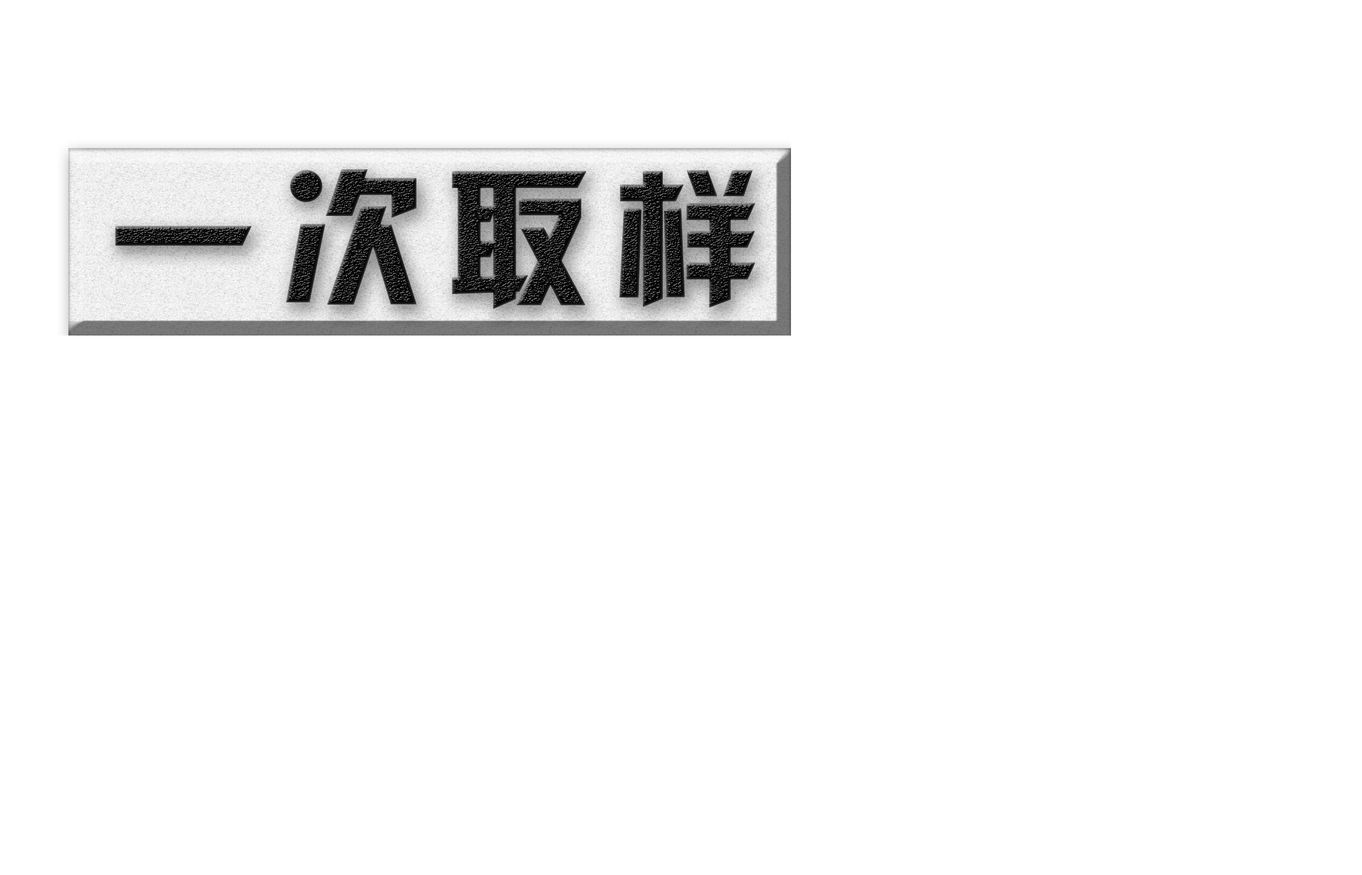
<style>
.page{position:relative;width:1362px;height:875px;background:#ffffff}
.page>*{position:absolute;margin:0}
.t1{font:149.1px "JLinXin";letter-spacing:0.1em;font-weight:bold}
</style>
<div class="page">
<p class="t1" style="left:115px;top:169px;width:640px;height:140px">一次取样</p>
</div>
